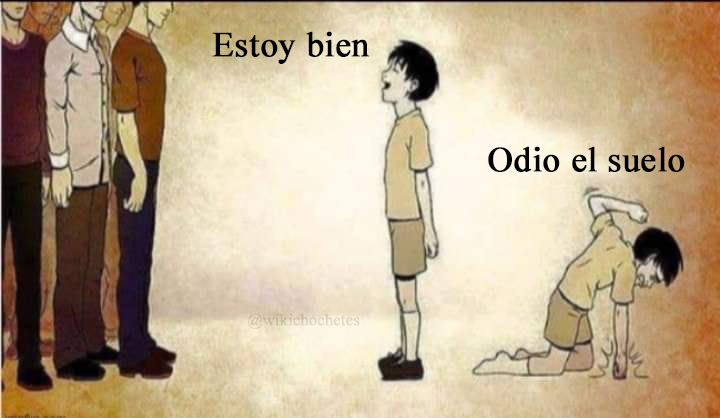
<style>
.page{position:relative;width:720px;height:418px}
.page>*{position:absolute;margin:0}
.t1{font:34.9px "TimesNewRomanPSMT";color:#000000;font-weight:bold}
.t2{font:35px "TimesNewRomanPSMT";color:#000000;font-weight:bold}
.t3{font:16.1px "TimesNewRomanPSMT";color:#dbd0be;font-weight:bold}
</style>
<div class="page">
<p class="t1" style="left:212px;top:31px;width:158px;height:33px">Estoy bien</p>
<p class="t2" style="left:488px;top:146px;width:197px;height:26px">Odio el suelo</p>
<p class="t3" style="left:248px;top:313px;width:112px;height:16px">@wikichochetes</p>
</div>
